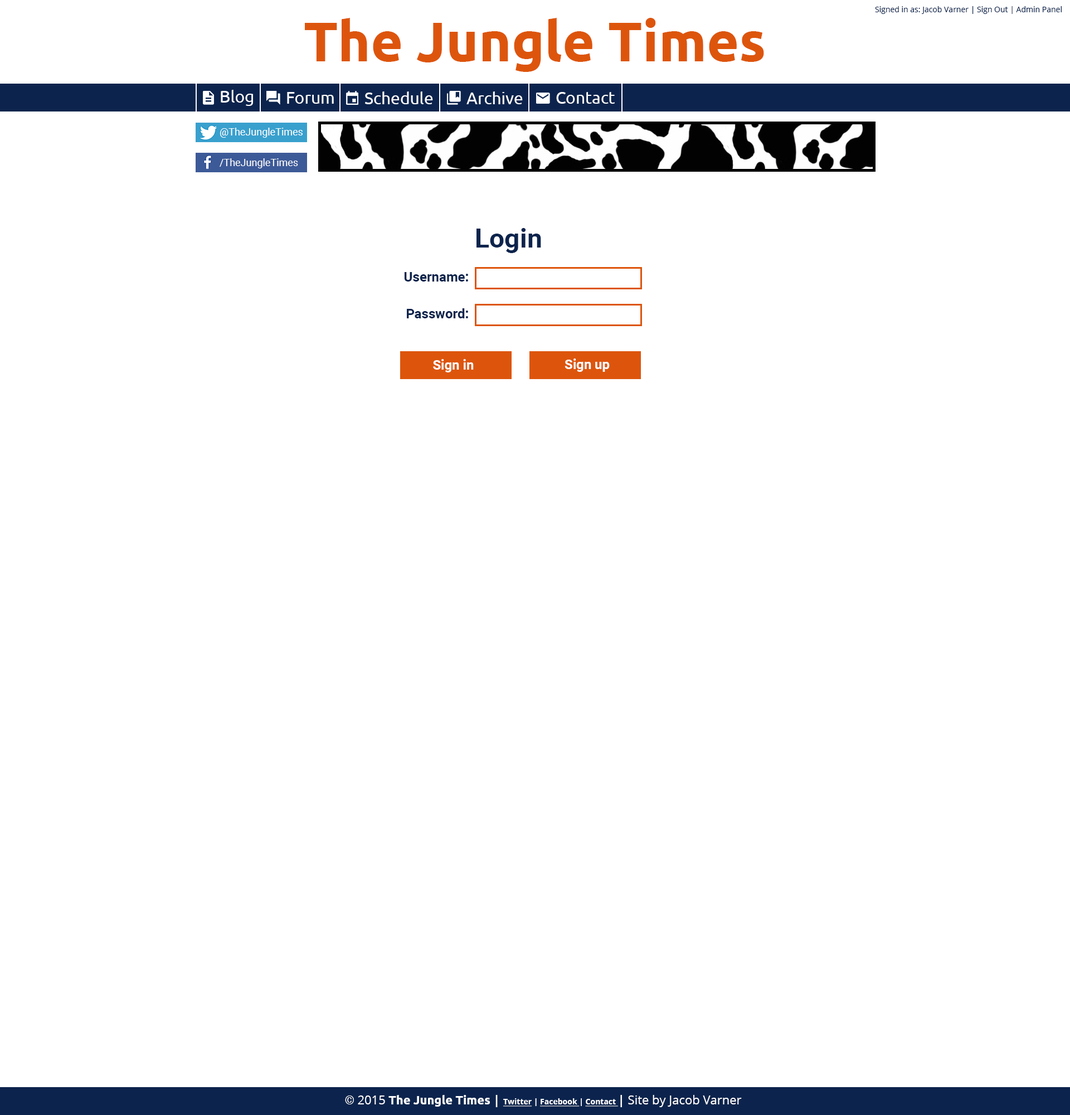
<style>
.page{position:relative;width:1070px;height:1115px;background:#ffffff}
.page>*{position:absolute;margin:0}
.t1{font:55.7px "Ubuntu-Bold";color:#dd550c}
.t2{font:7.8px "OpenSans";color:#0c244d}
.t3{font:16.7px "Ubuntu";color:#ffffff}
.t4{font:10px "Roboto-Regular";color:#ffffff}
.t5{font:26.7px "Roboto-Bold";color:#0c244d}
.t6{font:13.4px "Roboto-Bold";color:#0c244d}
.t7{font:13.4px "Roboto-Bold";color:#ffffff}
.t8{font:12.3px "OpenSans";color:#ffffff}
.t9{font:12.3px "Roboto-Bold";color:#ffffff}
.t10{font:12.3px "Ubuntu-Bold";color:#ffffff}
.t11{font:12.3px "OpenSans-Bold";color:#ffffff}
.t12{font:7.8px "OpenSans-Bold";color:#ffffff;text-decoration:underline}
.t13{font:7.8px "OpenSans-Bold";color:#ffffff}
</style>
<div class="page">
<p class="t1" style="left:305px;top:18px;width:459px;height:54px">The Jungle Times</p>
<p class="t2" style="left:875px;top:6px;width:187px;height:8px">Signed in as: Jacob Varner | Sign Out | Admin Panel</p>
<p class="t3" style="left:221px;top:90px;width:32px;height:16px">Blog</p>
<p class="t3" style="left:287px;top:92px;width:47px;height:12px">Forum</p>
<p class="t3" style="left:365px;top:91px;width:68px;height:13px">Schedule</p>
<p class="t3" style="left:466px;top:91px;width:57px;height:13px">Archive</p>
<p class="t3" style="left:556px;top:92px;width:59px;height:12px">Contact</p>
<p class="t4" style="left:220px;top:128px;width:83px;height:10px">@TheJungleTimes</p>
<p class="t4" style="left:220px;top:158px;width:78px;height:10px">/TheJungleTimes</p>
<p class="t5" style="left:476px;top:228px;width:65px;height:25px">Login</p>
<p class="t6" style="left:404px;top:272px;width:64px;height:9px">Username:</p>
<p class="t6" style="left:407px;top:308px;width:61px;height:10px">Password:</p>
<p class="t7" style="left:433px;top:359px;width:41px;height:13px">Sign in</p>
<p class="t7" style="left:564px;top:358px;width:46px;height:14px">Sign up</p>
<p class="t8" style="left:345px;top:1094px;width:397px;height:13px"><span class="t9">© </span>2015 <span class="t10">The Jungle Times </span><span class="t11">| </span><span class="t12">Twitter</span><span class="t13"> | </span><span class="t12">Facebook </span><span class="t13">| </span><span class="t12">Contact </span><span class="t11">| </span>Site by Jacob Varner</p>
</div>
